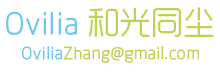
<style>
.page{position:relative;width:220px;height:72px;background:#ffffff}
.page>*{position:absolute;margin:0}
.t1{font:32px "RTWSYueGoTrial-Regular";color:#72c7eb}
.t2{font:32px "RTWSYueGoTrial-Regular";color:#bad455}
.t3{font:18px "RTWSYueGoTrial-Regular";color:#bad455}
.t4{font:18px "RTWSYueGoTrial-Regular";color:#72c7eb}
</style>
<div class="page">
<p class="t1" style="left:6px;top:7px;width:208px;height:30px">Ovilia <span class="t2">和光同尘</span></p>
<p class="t3" style="left:22px;top:46px;width:177px;height:17px"><span class="t4">Ovilia</span>Zhang@gmail.com</p>
</div>
